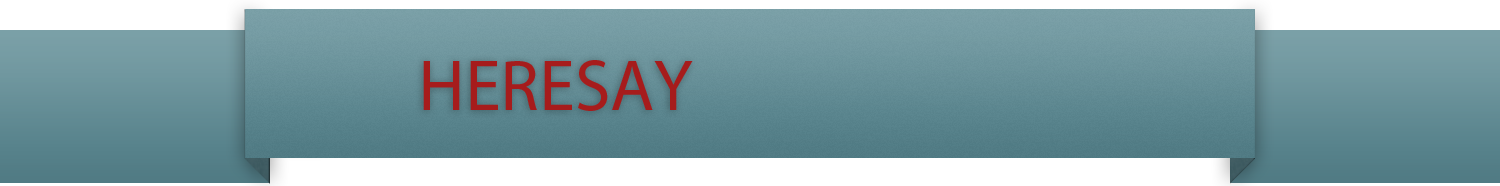
<style>
.page{position:relative;width:1500px;height:186px}
.page>*{position:absolute;margin:0}
.t1{font:72px "MyriadPro-Regular";color:#a61c1c}
</style>
<div class="page">
<p class="t1" style="left:423px;top:60px;width:270px;height:51px">HERESAY</p>
</div>
